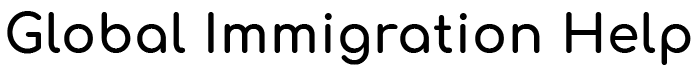
<style>
.page{position:relative;width:697px;height:71px;background:#ffffff}
.page>*{position:absolute;margin:0}
.t1{font:52px "Comfortaa-Bold";letter-spacing:0.02em;color:#000000}
</style>
<div class="page">
<p class="t1" style="left:7px;top:11px;width:684px;height:54px">Global Immigration Help</p>
</div>
